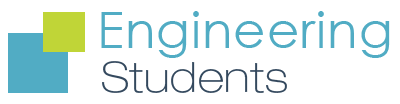
<style>
.page{position:relative;width:400px;height:104px;background:#ffffff}
.page>*{position:absolute;margin:0}
.t1{font:50px "CenturyGothic";letter-spacing:0.02em;color:#51acc4}
.t2{font:42px "HelveticaNeueLTPro-ThEx";letter-spacing:0.02em;color:#34495e}
</style>
<div class="page">
<p class="t1" style="left:101px;top:11px;width:289px;height:47px">Engineering</p>
<p class="t2" style="left:102px;top:61px;width:185px;height:32px">Students</p>
</div>
